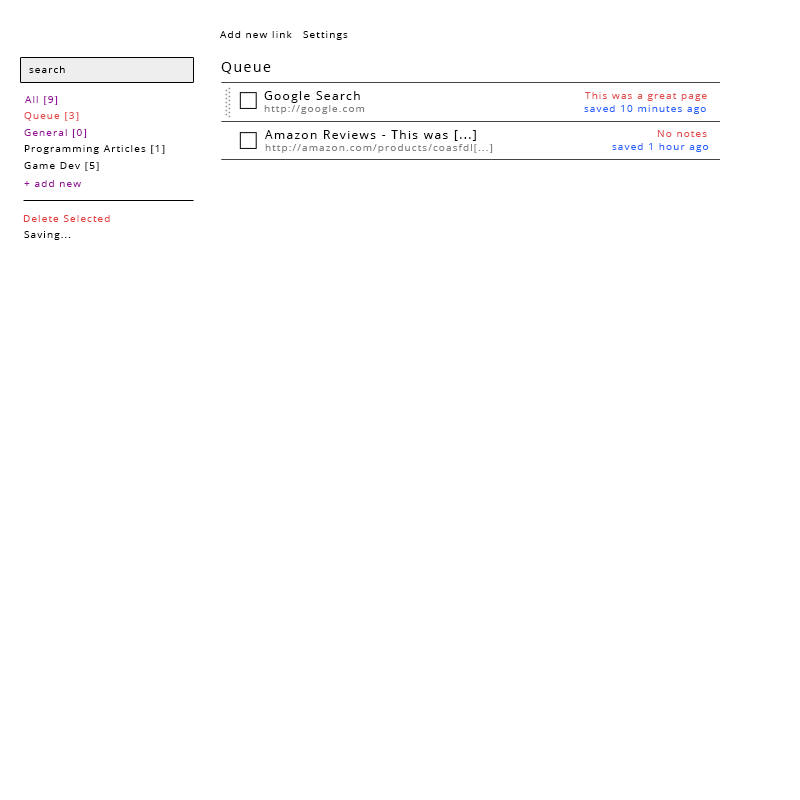
<style>
.page{position:relative;width:800px;height:800px;background:#ffffff}
.page>*{position:absolute;margin:0}
.t1{font:10px "OpenSans";letter-spacing:0.11em;color:#000000}
.t2{font:14px "OpenSans";letter-spacing:0.11em;color:#000000}
.t3{font:10px "OpenSans";letter-spacing:0.11em;color:#971099}
.t4{font:12px "OpenSans";letter-spacing:0.11em;color:#000000}
.t5{font:10px "OpenSans";letter-spacing:0.11em;color:#e34e4e}
.t6{font:10px "OpenSans";letter-spacing:0.11em;color:#808080}
.t7{font:10px "OpenSans";letter-spacing:0.11em;color:#2663ff}
.t8{font:10px "OpenSans";letter-spacing:0.11em;color:#e34343}
</style>
<div class="page">
<p class="t1" style="left:220px;top:31px;width:72px;height:7px">Add new link</p>
<p class="t1" style="left:303px;top:31px;width:45px;height:9px">Settings</p>
<p class="t2" style="left:221px;top:62px;width:50px;height:12px">Queue</p>
<p class="t1" style="left:29px;top:66px;width:36px;height:7px">search</p>
<p class="t3" style="left:25px;top:96px;width:33px;height:9px">All [9]</p>
<p class="t4" style="left:264px;top:91px;width:96px;height:12px">Google Search</p>
<p class="t5" style="left:585px;top:92px;width:122px;height:9px">This was a great page</p>
<p class="t5" style="left:24px;top:112px;width:55px;height:9px">Queue [3]</p>
<p class="t6" style="left:264px;top:105px;width:101px;height:9px">http://google.com</p>
<p class="t7" style="left:584px;top:105px;width:122px;height:9px">saved 10 minutes ago</p>
<p class="t3" style="left:24px;top:129px;width:63px;height:9px">General [0]</p>
<p class="t4" style="left:265px;top:130px;width:211px;height:11px">Amazon Reviews - This was [...]</p>
<p class="t5" style="left:657px;top:130px;width:50px;height:7px">No notes</p>
<p class="t1" style="left:24px;top:145px;width:141px;height:9px">Programming Articles [1]</p>
<p class="t6" style="left:265px;top:144px;width:228px;height:9px">http://amazon.com/products/coasfdl[...]</p>
<p class="t7" style="left:612px;top:143px;width:97px;height:9px">saved 1 hour ago</p>
<p class="t1" style="left:24px;top:162px;width:75px;height:9px">Game Dev [5]</p>
<p class="t3" style="left:24px;top:180px;width:57px;height:7px">+ add new</p>
<p class="t8" style="left:23px;top:215px;width:87px;height:7px">Delete Selected</p>
<p class="t1" style="left:24px;top:231px;width:47px;height:9px">Saving...</p>
</div>
